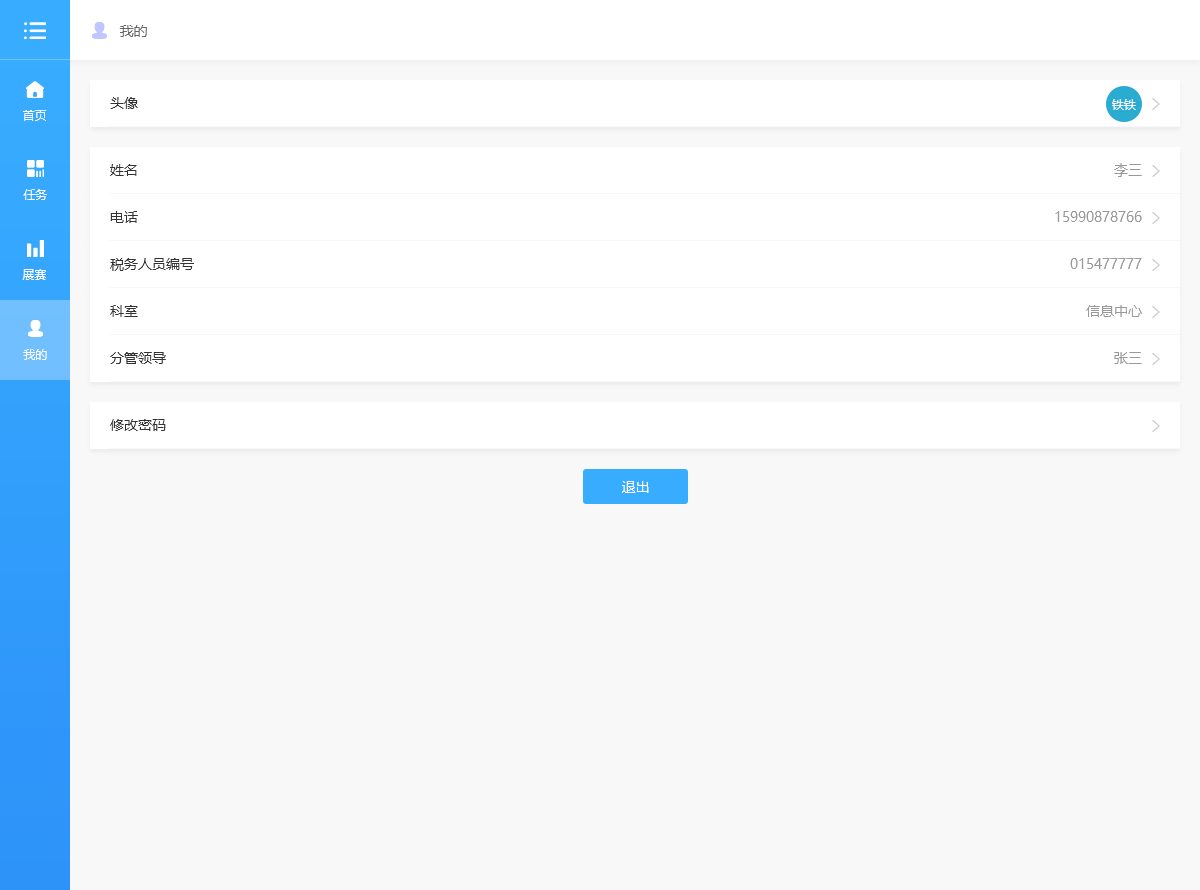
<style>
.page{position:relative;width:1200px;height:890px;background:#f8f8f8}
.page>*{position:absolute;margin:0}
.t1{font:14px "MicrosoftYaHei";color:#666666}
.t2{font:14px "MicrosoftYaHei";color:#333333}
.t3{font:12px "MicrosoftYaHei";color:#ffffff}
.t4{font:14px "MicrosoftYaHei";color:#999999}
.t5{font:14px "MicrosoftYaHei";color:#ffffff}
</style>
<div class="page">
<p class="t1" style="left:119px;top:25px;width:28px;height:12px">我的</p>
<p class="t2" style="left:110px;top:97px;width:28px;height:12px">头像</p>
<p class="t3" style="left:1112px;top:99px;width:24px;height:11px">铁铁</p>
<p class="t3" style="left:23px;top:110px;width:24px;height:11px">首页</p>
<p class="t2" style="left:110px;top:164px;width:27px;height:12px">姓名</p>
<p class="t4" style="left:1114px;top:163px;width:28px;height:14px">李三</p>
<p class="t3" style="left:23px;top:189px;width:24px;height:11px">任务</p>
<p class="t2" style="left:110px;top:211px;width:28px;height:12px">电话</p>
<p class="t4" style="left:1055px;top:211px;width:87px;height:11px">15990878766</p>
<p class="t3" style="left:22px;top:269px;width:24px;height:11px">展赛</p>
<p class="t2" style="left:110px;top:258px;width:84px;height:13px">税务人员编号</p>
<p class="t4" style="left:1070px;top:258px;width:72px;height:11px">015477777</p>
<p class="t2" style="left:110px;top:305px;width:28px;height:12px">科室</p>
<p class="t4" style="left:1086px;top:305px;width:56px;height:12px">信息中心</p>
<p class="t3" style="left:23px;top:349px;width:24px;height:11px">我的</p>
<p class="t2" style="left:110px;top:352px;width:56px;height:12px">分管领导</p>
<p class="t4" style="left:1114px;top:352px;width:28px;height:12px">张三</p>
<p class="t2" style="left:110px;top:419px;width:56px;height:12px">修改密码</p>
<p class="t5" style="left:622px;top:481px;width:27px;height:12px">退出</p>
</div>
